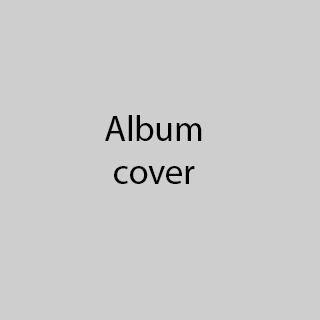
<style>
.page{position:relative;width:320px;height:320px;background:#cecece}
.page>*{position:absolute;margin:0}
.t1{font:36px "MyriadPro-Regular";color:#000000}
</style>
<div class="page">
<p class="t1" style="left:105px;top:115px;width:97px;height:69px;text-align:center">Album<br>cover</p>
</div>
